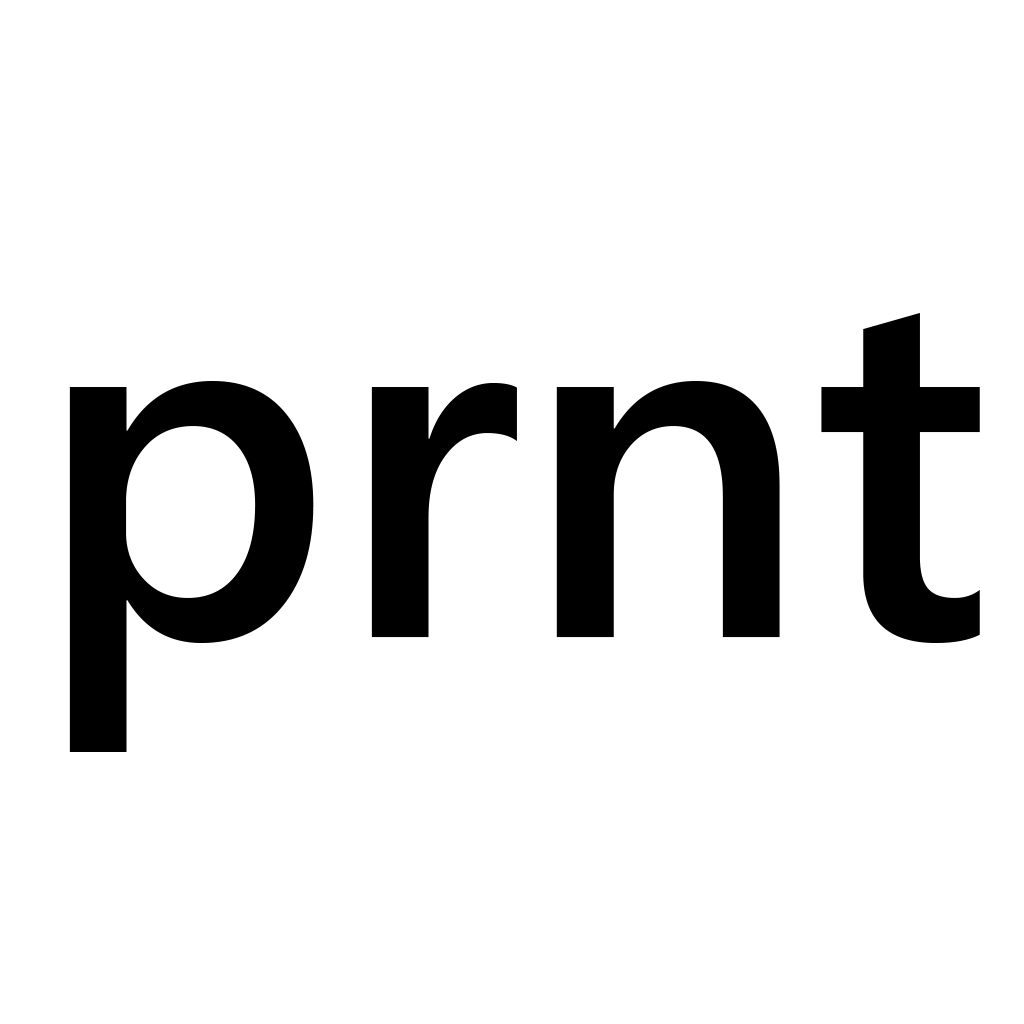
<style>
.page{position:relative;width:1024px;height:1024px;background:#ffffff}
.page>*{position:absolute;margin:0}
.t1{font:500px "SegoeUI-Semibold";color:#000000}
</style>
<div class="page">
<p class="t1" style="left:69px;top:313px;width:911px;height:439px">prnt</p>
</div>
